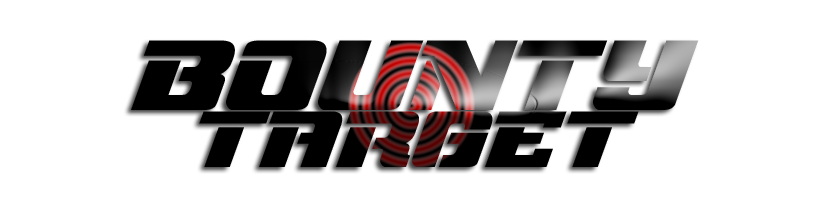
<style>
.page{position:relative;width:815px;height:215px;background:#ffffff}
.page>*{position:absolute;margin:0}
.t1{font:48px "NFLRedZone"}
.t2{font:60px "DamagedSerif"}
.t3{font:60px "NFLRedZone"}
</style>
<div class="page">
<p class="t1" style="left:131px;top:40px;width:568px;height:127px;text-align:center"><span class="t2"><br></span><span class="t3">B</span><span class="t3">ounty<br></span>tARGET</p>
</div>
